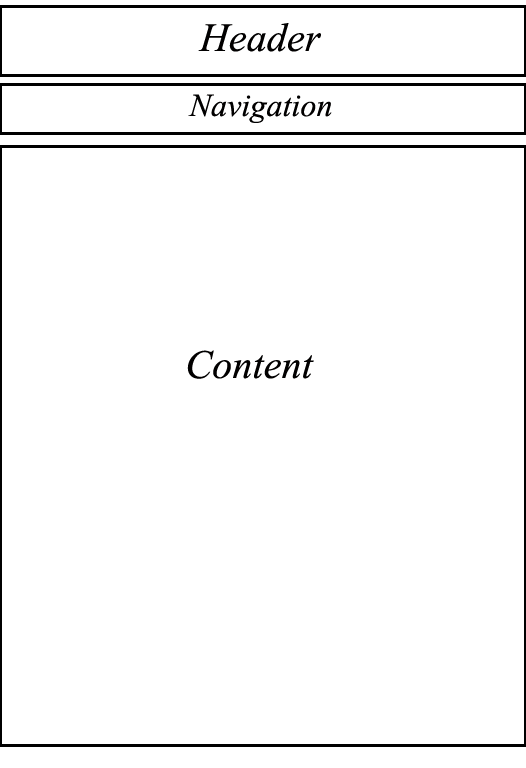
<style>
.page{position:relative;width:526px;height:768px;background:#ffffff}
.page>*{position:absolute;margin:0}
.t1{font:50px "Vijaya";color:#010000}
.t2{font:40px "Vijaya";color:#010000}
</style>
<div class="page">
<p class="t1" style="left:198px;top:23px;width:123px;height:29px">Header</p>
<p class="t2" style="left:188px;top:94px;width:144px;height:29px">Navigation</p>
<p class="t1" style="left:187px;top:350px;width:127px;height:29px">Content</p>
</div>
